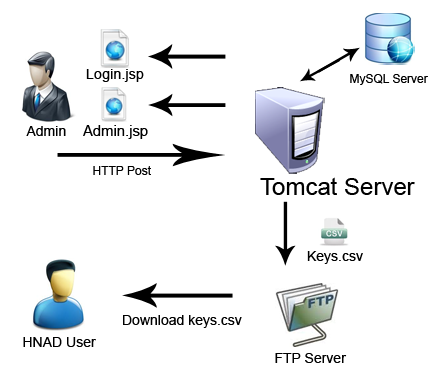
<style>
.page{position:relative;width:432px;height:369px;background:#ffffff}
.page>*{position:absolute;margin:0}
.t1{font:14.5px "ArialMT";color:#000000}
.t2{font:12px "ArialMT";color:#000000}
.t3{font:14px "ArialMT";color:#000000}
.t4{font:14.8px "ArialMT";color:#000000}
.t5{font:24px "ArialMT";color:#000000}
</style>
<div class="page">
<p class="t1" style="left:86px;top:69px;width:58px;height:13px">Login.jsp</p>
<p class="t2" style="left:350px;top:74px;width:78px;height:11px">MySQL Server</p>
<p class="t3" style="left:26px;top:126px;width:40px;height:10px">Admin</p>
<p class="t4" style="left:83px;top:125px;width:65px;height:14px">Admin.jsp</p>
<p class="t2" style="left:93px;top:166px;width:58px;height:9px">HTTP Post</p>
<p class="t5" style="left:260px;top:177px;width:155px;height:18px">Tomcat Server</p>
<p class="t3" style="left:307px;top:251px;width:56px;height:13px">Keys.csv</p>
<p class="t3" style="left:123px;top:315px;width:119px;height:13px">Download keys.csv</p>
<p class="t3" style="left:23px;top:337px;width:73px;height:10px">HNAD User</p>
<p class="t3" style="left:275px;top:353px;width:72px;height:10px">FTP Server</p>
</div>
